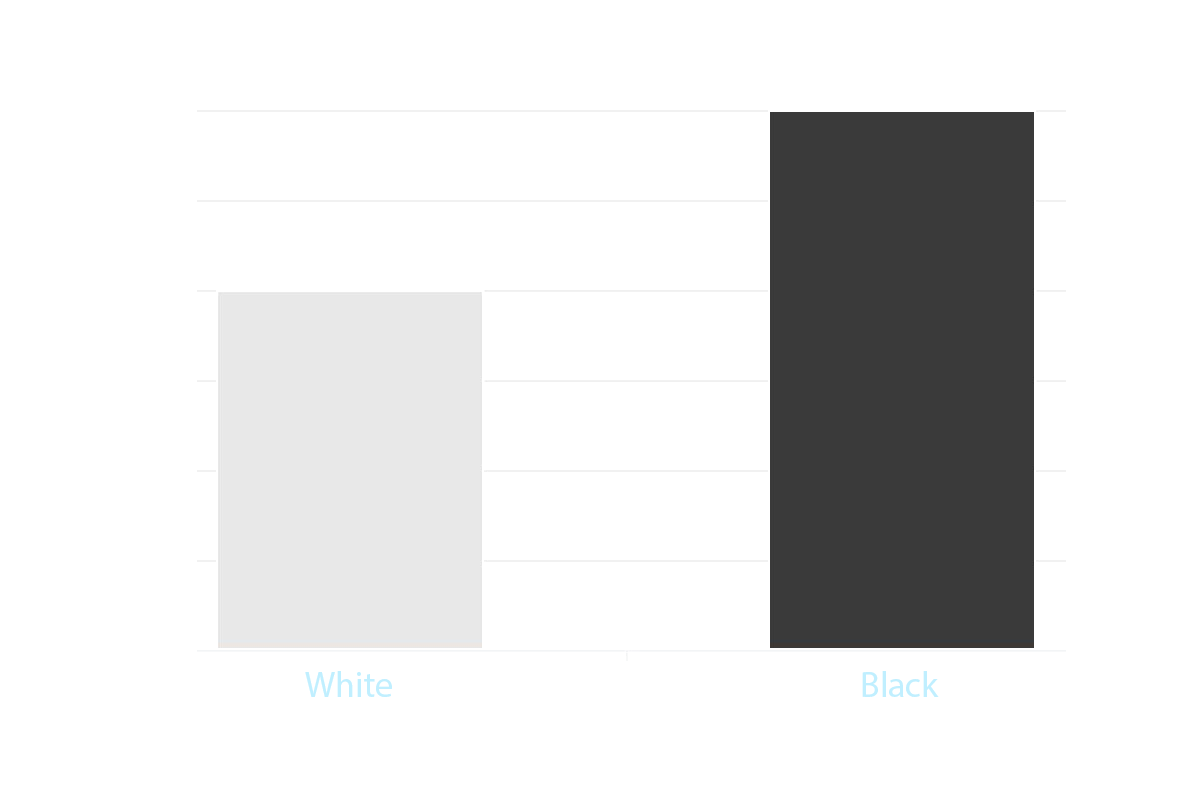
<style>
.page{position:relative;width:1200px;height:800px;background:#ffffff}
.page>*{position:absolute;margin:0}
.t1{font:36px "MyriadHebrew-Regular";color:#c0efff}
</style>
<div class="page">
<p class="t1" style="left:305px;top:671px;width:87px;height:26px">White</p>
<p class="t1" style="left:862px;top:671px;width:77px;height:26px">Black</p>
</div>
